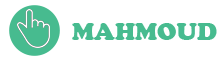
<style>
.page{position:relative;width:220px;height:60px;background:#ffffff}
.page>*{position:absolute;margin:0}
.t1{font:25px "CooperBlack";color:#47bb8f}
</style>
<div class="page">
<p class="t1" style="left:72px;top:23px;width:145px;height:17px">MAHMOUD</p>
</div>
